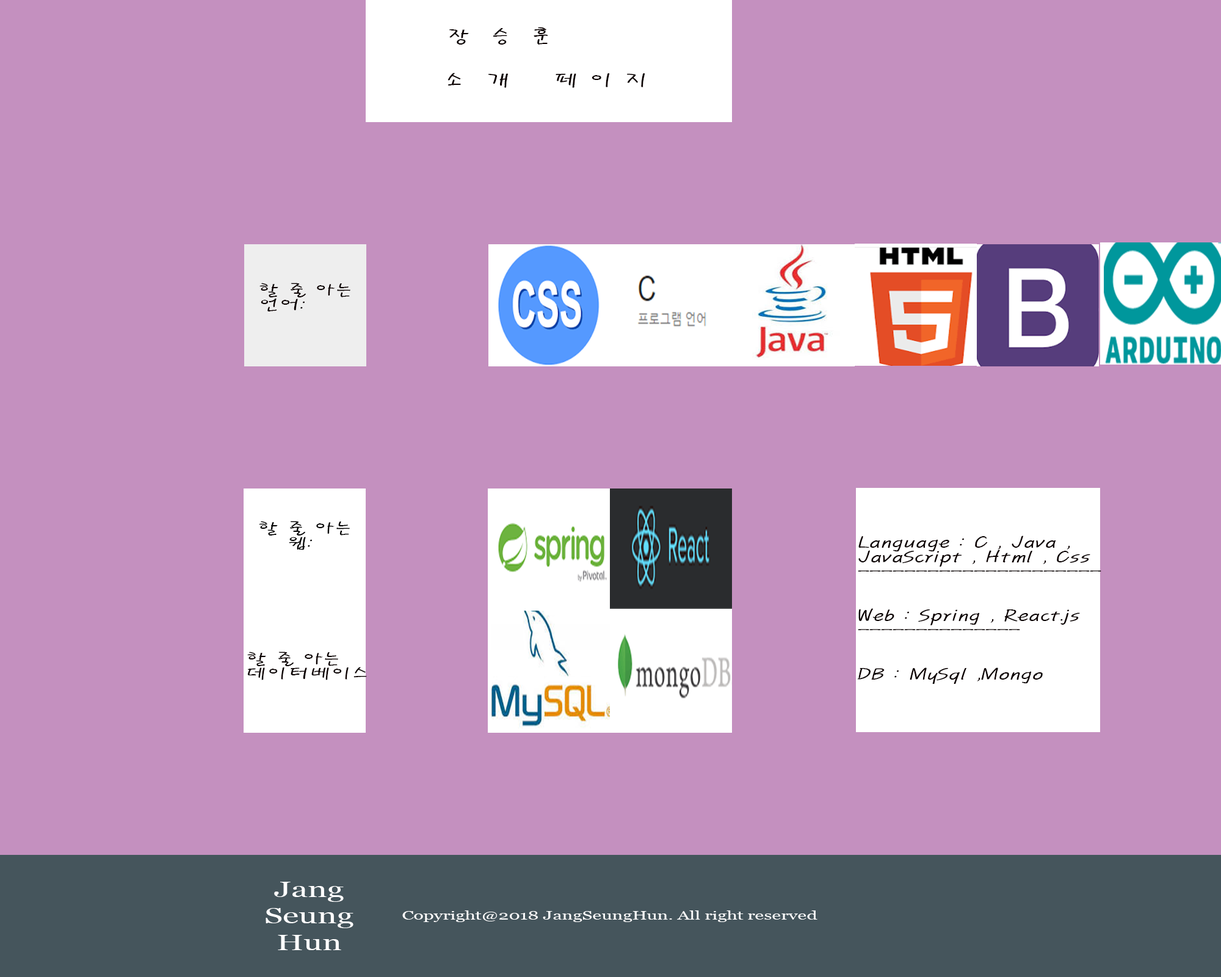
<style>
.page{position:relative;width:1221px;height:977px;background:#c490bf}
.page>*{position:absolute;margin:0}
.t1{font:18.3px/14.7px "PyunjiR-HM";color:#0b0000;scale:1.5 1}
.t2{font:15.9px/14.7px "PyunjiR-HM";color:#0b0000;scale:1.5 1}
.t3{font:15.9px/14.7px "PyunjiR-HM";color:#000000;scale:1.5 1}
.t4{font:22px "Georgia";color:#ffffff;scale:1.5 1}
.t5{font:12.2px "Georgia";color:#ffffff;scale:1.5 1}
</style>
<div class="page">
<p class="t1" style="left:447px;top:27px;width:198px;height:61px">장  승  훈 <br><br><br>소  개    페 이 지</p>
<p class="t2" style="left:259px;top:283px;width:91px;height:28px">할 줄 아는 언어:</p>
<p class="t3" style="left:259px;top:521px;width:91px;height:29px">할 줄 아는 <br>   웹:</p>
<p class="t2" style="left:857px;top:535px;width:244px;height:149px">Language : C , Java , JavaScript , Html , Css ---------------------<br><br><br>Web : Spring , React.js -------------- <br><br><br>DB : MySql ,Mongo</p>
<p class="t2" style="left:247px;top:651px;width:120px;height:29px">할 줄 아는 <br>데이터베이스</p>
<p class="t4" style="left:266px;top:881px;width:87px;height:69px;text-align:center">Jang<br>Seung<br>Hun</p>
<p class="t5" style="left:402px;top:910px;width:415px;height:12px">Copyright@2018 JangSeungHun. All right reserved</p>
</div>
